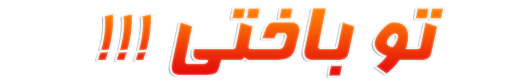
<style>
.page{position:relative;width:512px;height:83px;background:#ffffff}
.page>*{position:absolute;margin:0}
.t1{font:90px "BFarnaz"}
</style>
<div class="page">
<p class="t1" style="left:97px;top:8px;width:347px;height:68px">!!! تو باختی</p>
</div>
